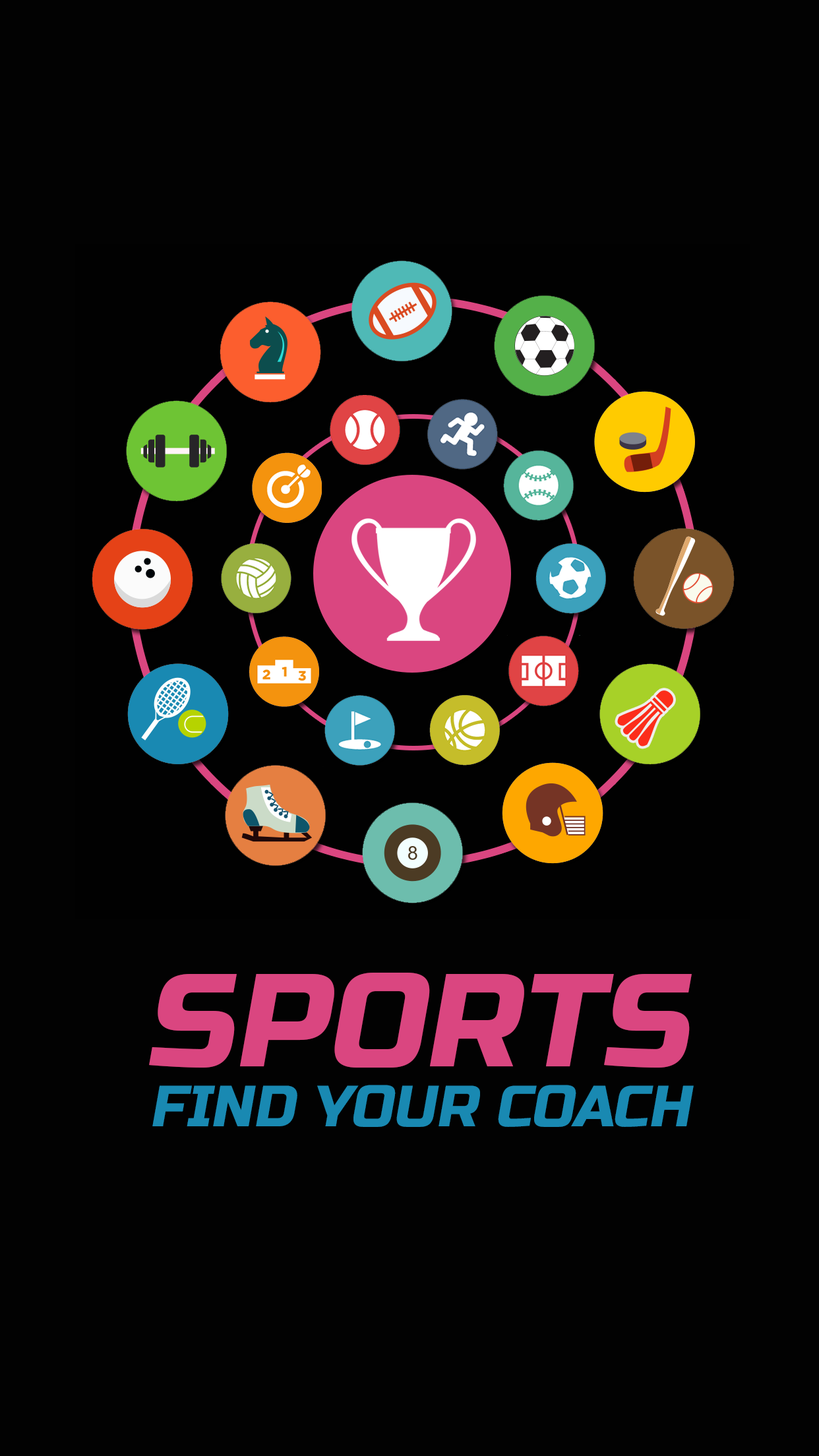
<style>
.page{position:relative;width:819px;height:1456px;background:#020202}
.page>*{position:absolute;margin:0}
.t1{font:131.9px "RussoOne-Regular";color:#da4680;font-style:italic}
.t2{font:58px "RussoOne-Regular";color:#1989b2;font-style:italic}
</style>
<div class="page">
<p class="t1" style="left:149px;top:973px;width:543px;height:95px">SPORTS</p>
<p class="t2" style="left:152px;top:1085px;width:542px;height:42px">FIND YOUR COACH</p>
</div>
